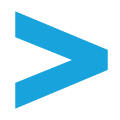
<style>
.page{position:relative;width:120px;height:120px;background:#ffffff}
.page>*{position:absolute;margin:0}
.t1{font:197.4px "Impact";color:#19a4dd}
</style>
<div class="page">
<p class="t1" style="left:15px;top:11px;width:93px;height:98px">&gt;</p>
</div>
